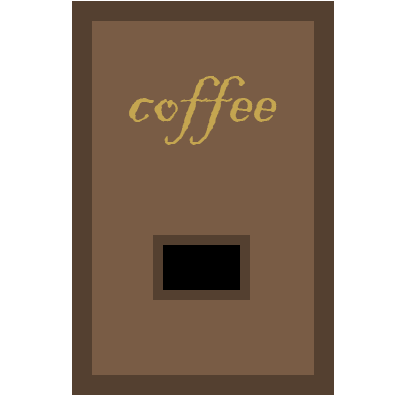
<style>
.page{position:relative;width:400px;height:400px;background:#795c45}
.page>*{position:absolute;margin:0}
.t1{font:80px "BlackadderITC-Regular";color:#c4a550}
</style>
<div class="page">
<p class="t1" style="left:129px;top:76px;width:148px;height:69px">coffee</p>
</div>
